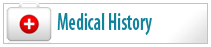
<style>
.page{position:relative;width:211px;height:47px;background:#ffffff}
.page>*{position:absolute;margin:0}
.t1{font:24px "MyriadPro-SemiboldCond";color:#11839a;scale:0.78 1}
</style>
<div class="page">
<p class="t1" style="left:57px;top:13px;width:95px;height:23px">Medical History</p>
</div>
